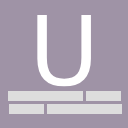
<style>
.page{position:relative;width:128px;height:128px;background:#9f93a6}
.page>*{position:absolute;margin:0}
.t1{font:96px "DejaVuSans";color:#ffffff}
</style>
<div class="page">
<p class="t1" style="left:37px;top:15px;width:54px;height:72px">U</p>
</div>
